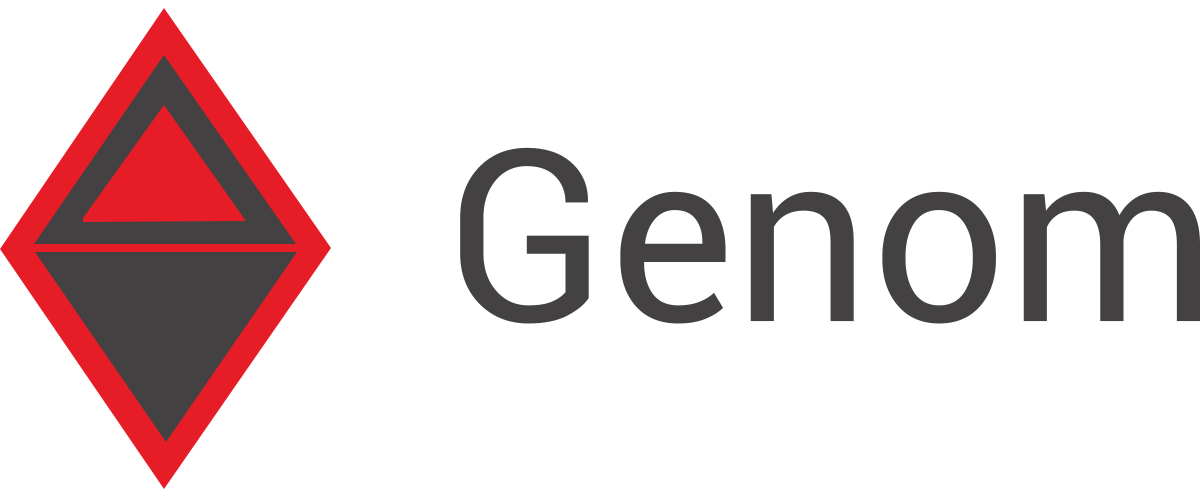
<style>
.page{position:relative;width:1200px;height:502px;background:#ffffff}
.page>*{position:absolute;margin:0}
.t1{font:240px "Roboto-Regular";color:#434142}
</style>
<div class="page">
<p class="t1" style="left:460px;top:147px;width:741px;height:177px">Genom</p>
</div>
